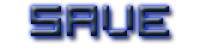
<style>
.page{position:relative;width:200px;height:50px;background:#ffffff}
.page>*{position:absolute;margin:0}
.t1{font:48px "Hooge0553"}
</style>
<div class="page">
<p class="t1" style="left:31px;top:6px;width:138px;height:30px">save</p>
</div>
